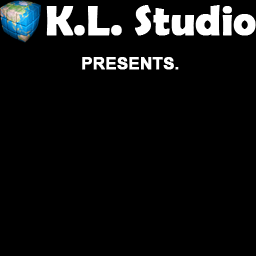
<style>
.page{position:relative;width:256px;height:256px;background:#000000}
.page>*{position:absolute;margin:0}
.t1{font:41.7px "BerlinSansFBDemi-Bold";color:#ffffff;font-weight:bold}
.t2{font:16.7px "Arial-BoldMT";color:#ffffff;font-weight:bold}
</style>
<div class="page">
<p class="t1" style="left:46px;top:5px;width:210px;height:31px">K.L. Studio</p>
<p class="t2" style="left:82px;top:57px;width:97px;height:13px">PRESENTS.</p>
</div>
